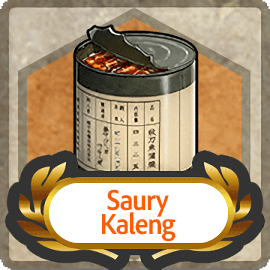
<style>
.page{position:relative;width:270px;height:270px}
.page>*{position:absolute;margin:0}
.t1{font:30px/24px "AdobeClean-Bold";letter-spacing:-0.04em;color:#ff5d00;scale:0.9 1}
</style>
<div class="page">
<p class="t1" style="left:102px;top:189px;width:74px;height:53px;text-align:center">Saury<br>Kaleng</p>
</div>
